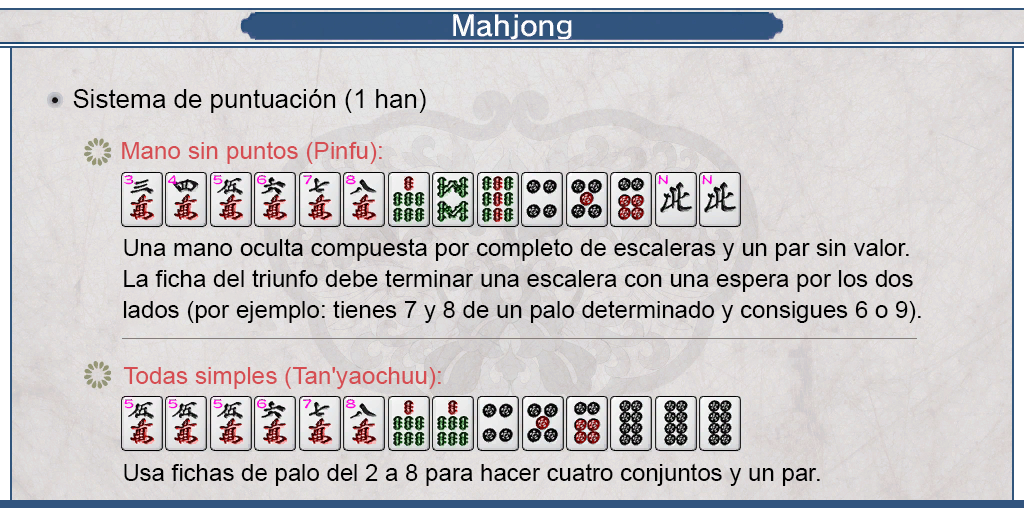
<style>
.page{position:relative;width:1024px;height:512px}
.page>*{position:absolute;margin:0}
.t1{font:26px "ArialMT";color:#000000}
.t2{font:24px "ArialMT";color:#d64d52}
.t3{font:24px/31px "ArialMT";color:#000000}
.t4{font:24px "ArialMT";color:#000000}
</style>
<div class="page">
<p class="t1" style="left:73px;top:89px;width:353px;height:24px">Sistema de puntuación (1 han)</p>
<p class="t2" style="left:122px;top:141px;width:260px;height:23px">Mano sin puntos (Pinfu):</p>
<p class="t3" style="left:123px;top:238px;width:798px;height:85px;text-align:justify">Una mano oculta compuesta por completo de escaleras y un par sin valor. <br>La ficha del triunfo debe terminar una escalera con una espera por los dos<br>lados (por ejemplo: tienes 7 y 8 de un palo determinado y consigues 6 o 9).</p>
<p class="t2" style="left:123px;top:367px;width:318px;height:22px">Todas simples (Tan'yaochuu):</p>
<p class="t4" style="left:124px;top:463px;width:696px;height:23px">Usa fichas de palo del 2 a 8 para hacer cuatro conjuntos y un par.</p>
</div>
